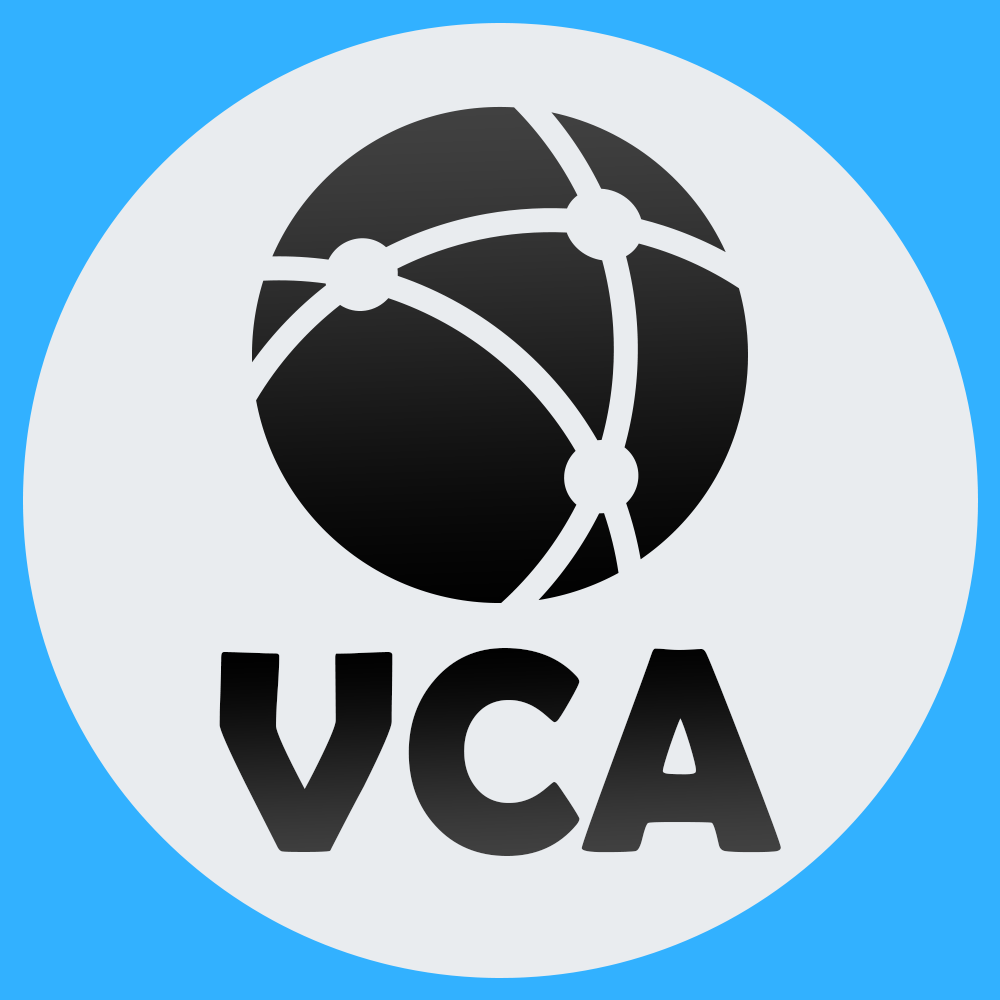
<style>
.page{position:relative;width:1000px;height:1000px;background:#e9ecef}
.page>*{position:absolute;margin:0}
.t1{font:290px "BerlinSansFBDemi-Bold"}
</style>
<div class="page">
<p class="t1" style="left:219px;top:648px;width:562px;height:208px">VCA</p>
</div>
